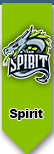
<style>
.page{position:relative;width:54px;height:154px;background:#8ac202}
.page>*{position:absolute;margin:0}
.t1{font:11.7px "Arial-Black";letter-spacing:-0.01em;color:#000000}
</style>
<div class="page">
<p class="t1" style="left:9px;top:109px;width:34px;height:11px">Spirit</p>
</div>
